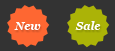
<style>
.page{position:relative;width:115px;height:51px;background:#333333}
.page>*{position:absolute;margin:0}
.t1{font:11px "Georgia-BoldItalic";color:#ffffff}
</style>
<div class="page">
<p class="t1" style="left:14px;top:22px;width:27px;height:8px">New</p>
<p class="t1" style="left:75px;top:21px;width:26px;height:9px">Sale</p>
</div>
